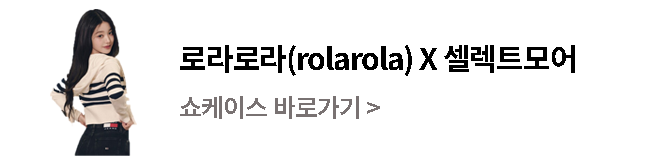
<style>
.page{position:relative;width:670px;height:156px;background:#ffffff}
.page>*{position:absolute;margin:0}
.t1{font:30px/47px "NotoSansKR-Bold";letter-spacing:-0.04em;color:#000000}
.t2{font:25px/47px "NotoSansKR-SemiBold";letter-spacing:-0.04em;color:#797272}
</style>
<div class="page">
<p class="t1" style="left:180px;top:45px;width:395px;height:74px">로라로라(rolarola) X 셀렉트모어<br><span class="t2">쇼케이스 바로가기 &gt;</span></p>
</div>
